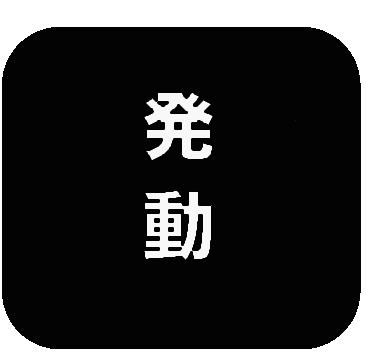
<style>
.page{position:relative;width:366px;height:352px;background:#040303}
.page>*{position:absolute;margin:0}
.t1{font:75px "HiraKakuStdN-W8";color:#f9f8f8}
</style>
<div class="page">
<p class="t1" style="left:142px;top:91px;width:72px;height:170px;text-align:center">発 動</p>
</div>
